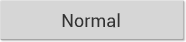
<style>
.page{position:relative;width:186px;height:42px;background:#d6d6d6}
.page>*{position:absolute;margin:0}
.t1{font:18px "Roboto-Regular";color:#333333}
</style>
<div class="page">
<p class="t1" style="left:62px;top:13px;width:58px;height:15px">Normal</p>
</div>
